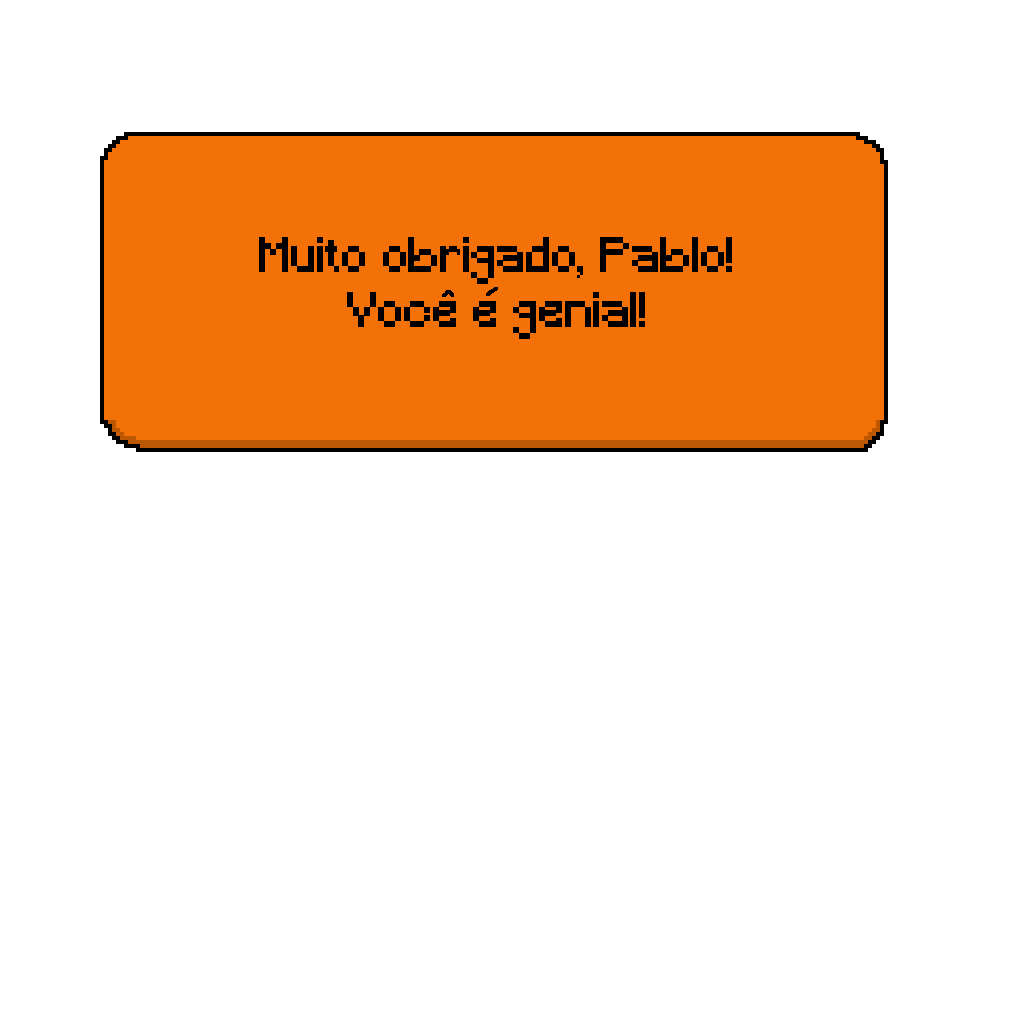
<style>
.page{position:relative;width:1024px;height:1024px;background:#ffffff}
.page>*{position:absolute;margin:0}
.t1{font:45.8px "Minecraft";color:#000000}
</style>
<div class="page">
<p class="t1" style="left:259px;top:237px;width:473px;height:102px;text-align:center">Muito obrigado, Pablo!<br>Voce e genial!</p>
</div>
